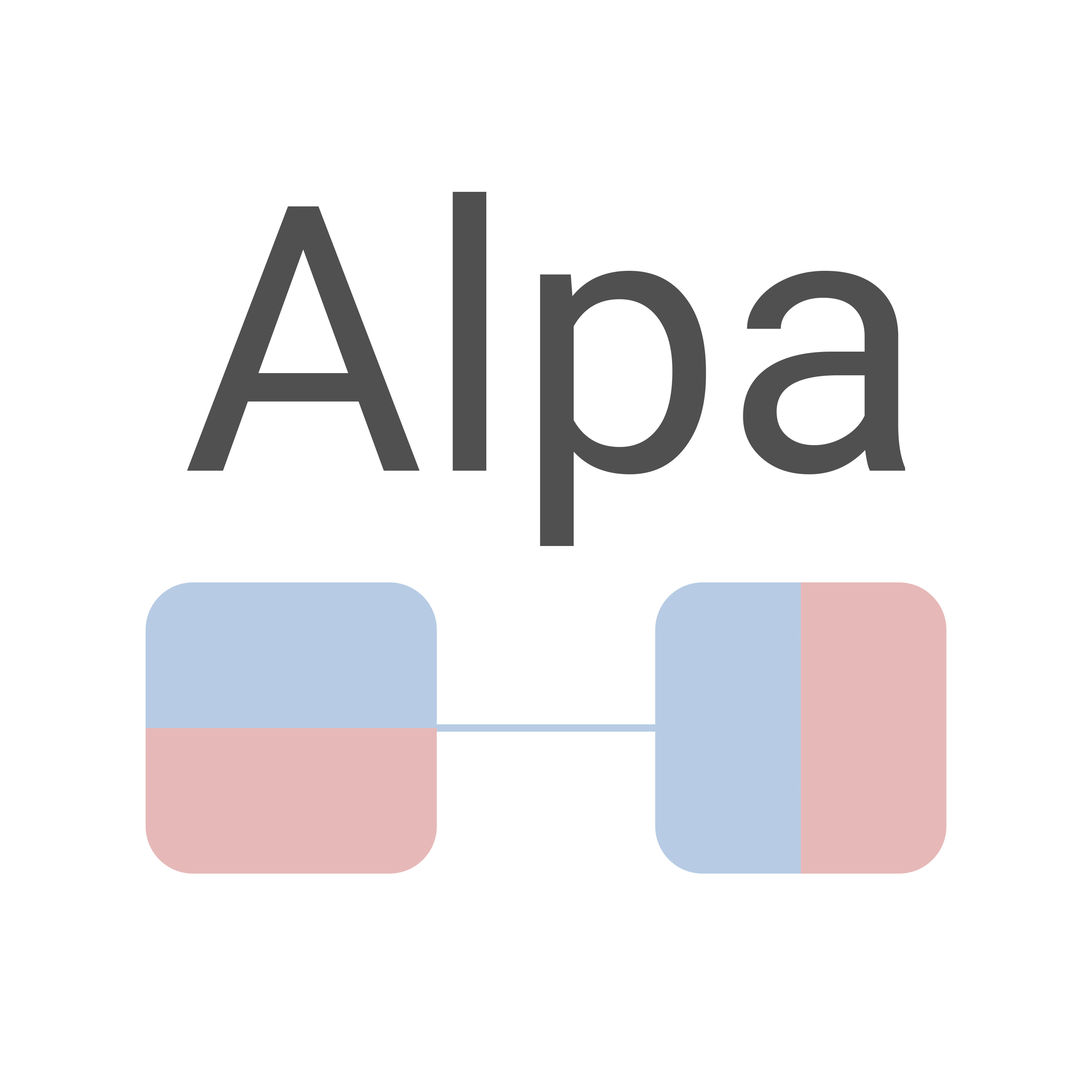
<style>
.page{position:relative;width:1092px;height:1092px;background:#ffffff}
.page>*{position:absolute;margin:0}
.t1{font:371.6px "Roboto-Regular";color:#505050}
</style>
<div class="page">
<p class="t1" style="left:187px;top:192px;width:718px;height:354px">Alpa</p>
</div>
